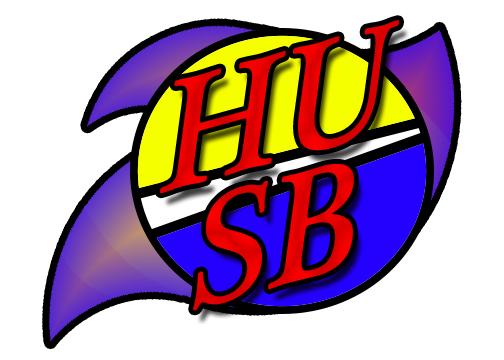
<style>
.page{position:relative;width:504px;height:360px;background:#ffffff}
.page>*{position:absolute;margin:0}
.t1{font:166.7px "PlantagenetCherokee";color:#e30000;scale:0.89 1}
.t2{font:166.7px "PlantagenetCherokee";color:#e40000;scale:0.89 1}
</style>
<div class="page">
<p class="t1" style="left:160px;top:20px;width:239px;height:174px;rotate:-15deg">HU</p>
<p class="t2" style="left:193px;top:164px;width:161px;height:147px;rotate:-15deg">SB</p>
</div>
